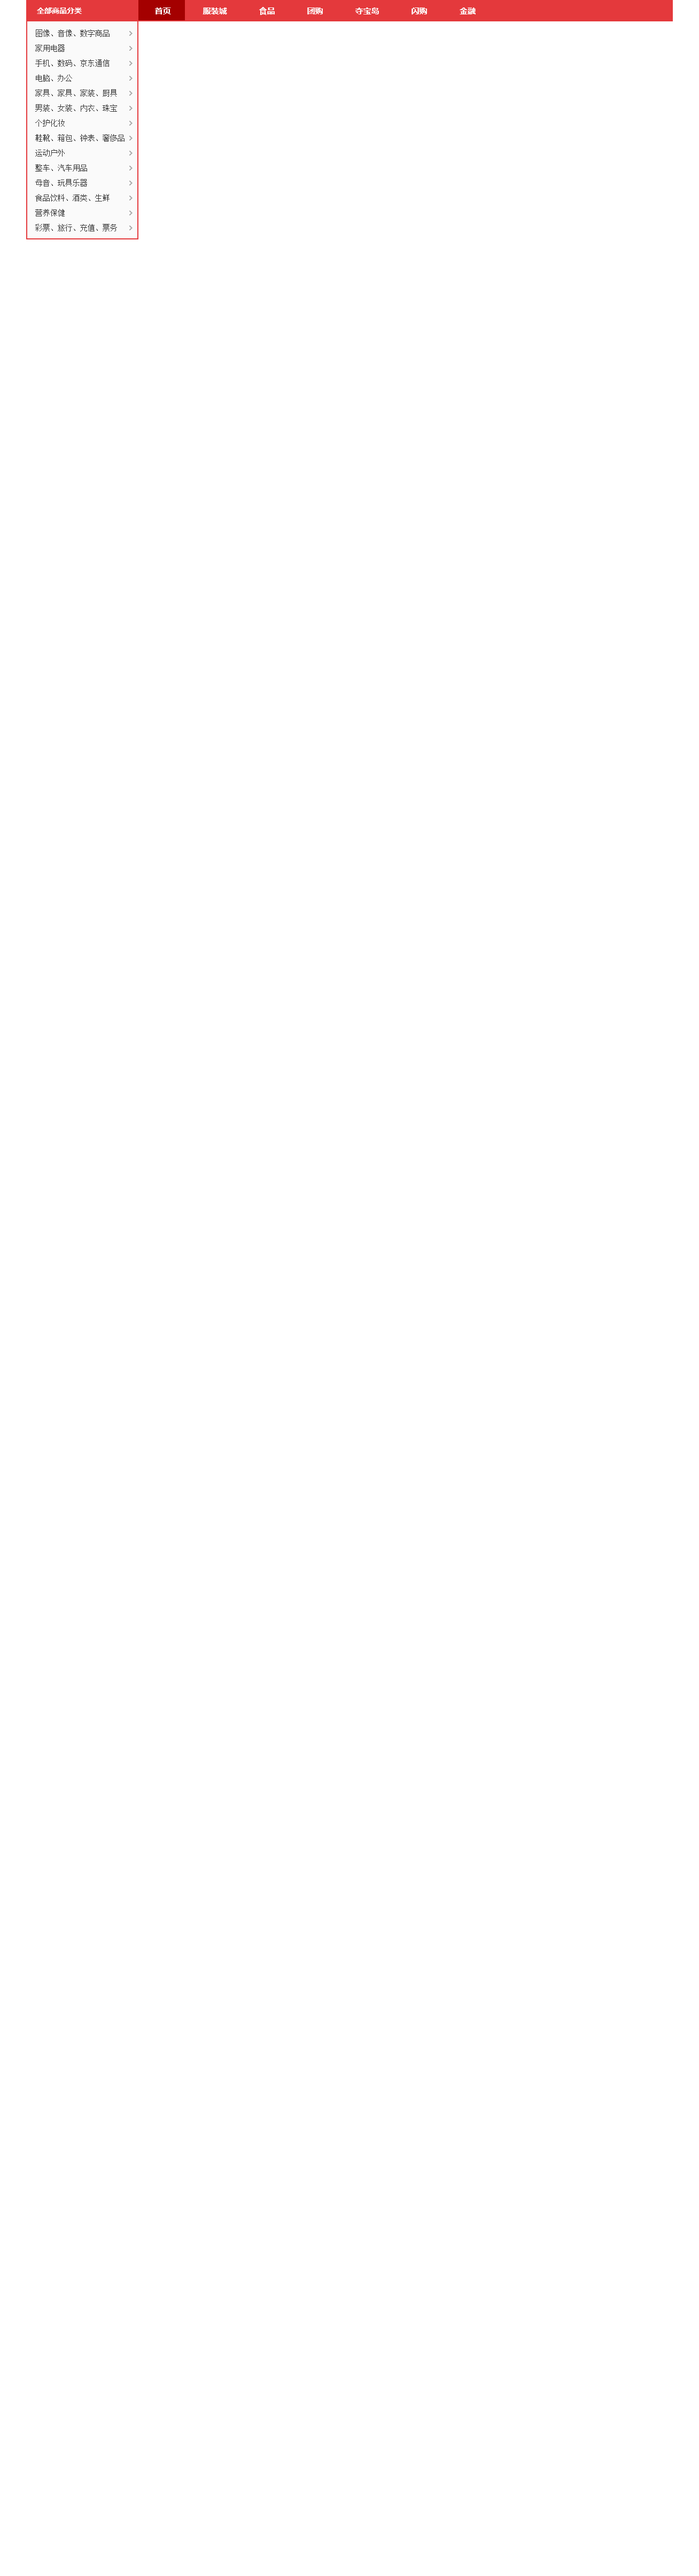
<style>
.page{position:relative;width:699px;height:2576px;background:#ffffff}
.page>*{position:absolute;margin:0}
.t1{font:7.5px "MicrosoftYaHei-Bold";color:#ffffff}
.t2{font:8px "MicrosoftYaHei-Bold";color:#ffffff}
.t3{font:7.5px/15px "SimSun";color:#333333}
</style>
<div class="page">
<p class="t1" style="left:37px;top:7px;width:45px;height:7px">全部商品分类</p>
<p class="t2" style="left:155px;top:7px;width:321px;height:8px">首页            服装城            食品            团购            夺宝岛            闪购            金融</p>
<p class="t3" style="left:35px;top:29px;width:90px;height:202px">图像、音像、数字商品<br>家用电器<br>手机、数码、京东通信<br>电脑、办公<br>家具、家具、家装、厨具<br>男装、女装、内衣、珠宝<br>个护化妆<br>鞋靴、箱包、钟表、奢侈品<br>运动户外<br>整车、汽车用品<br>母音、玩具乐器<br>食品饮料、酒类、生鲜<br>营养保健<br>彩票、旅行、充值、票务</p>
</div>
